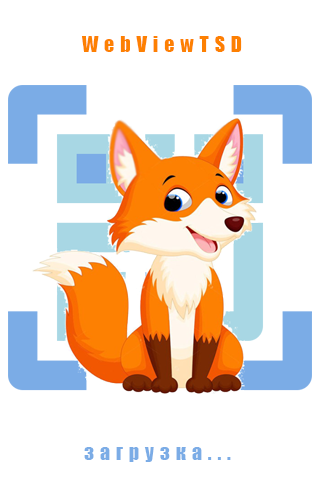
<style>
.page{position:relative;width:320px;height:480px;background:#ffffff}
.page>*{position:absolute;margin:0}
.t1{font:19.8px "Impact";letter-spacing:0.3em;color:#fd8002}
.t2{font:19.8px "Impact";letter-spacing:0.3em;color:#7bace6}
</style>
<div class="page">
<p class="t1" style="left:82px;top:36px;width:160px;height:16px">WebViewTSD</p>
<p class="t2" style="left:84px;top:447px;width:147px;height:15px">загрузка...</p>
</div>
